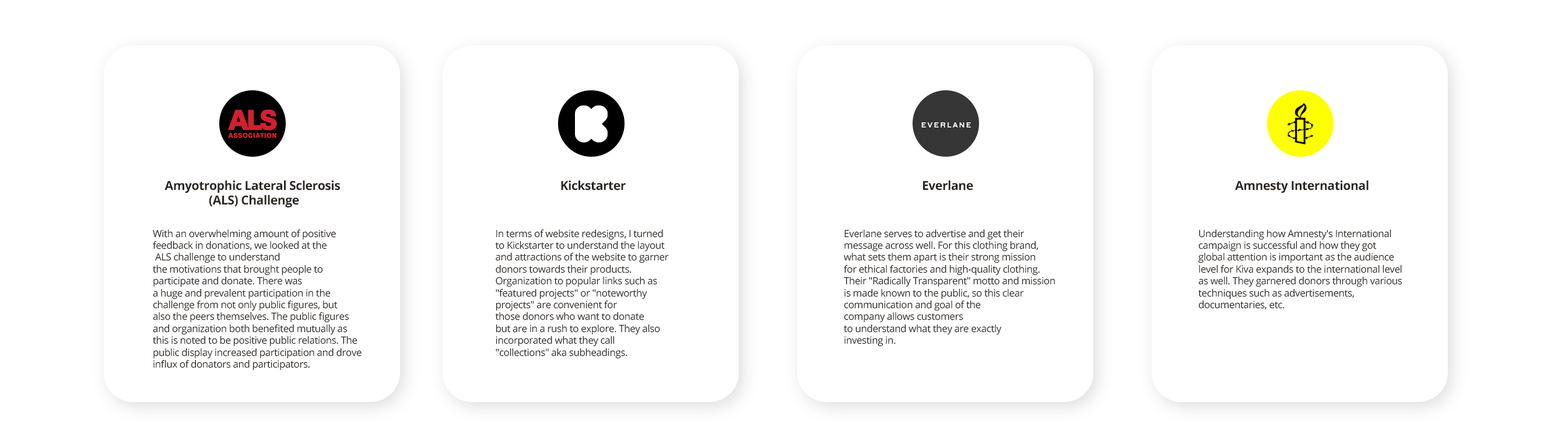
<style>
.page{position:relative;width:1568px;height:448px;background:#ffffff}
.page>*{position:absolute;margin:0}
.t1{font:12.4px "OpenSans-Bold";letter-spacing:-0.025em;color:#2b2520}
.t2{font:9.9px "OpenSans-Regular";letter-spacing:-0.025em;color:#2b2520}
</style>
<div class="page">
<p class="t1" style="left:164px;top:180px;width:176px;height:28px;text-align:center">Amyotrophic Lateral Sclerosis <br>(ALS) Challenge</p>
<p class="t1" style="left:561px;top:180px;width:65px;height:11px">Kickstarter</p>
<p class="t1" style="left:923px;top:180px;width:50px;height:11px">Everlane</p>
<p class="t1" style="left:1235px;top:180px;width:134px;height:13px">Amnesty International</p>
<p class="t2" style="left:153px;top:229px;width:209px;height:142px">With an overwhelming amount of positive <br>feedback in donations, we looked at the<br> ALS challenge to understand <br>the motivations that brought people to <br>participate and donate. There was<br>a huge and prevalent participation in the <br>challenge from not only public figures, but<br>also the peers themselves. The public figures <br>and organization both benefited mutually as <br>this is noted to be positive public relations. The<br>public display increased participation and drove<br>influx of donators and participators.</p>
<p class="t2" style="left:495px;top:229px;width:174px;height:130px">In terms of website redesigns, I turned<br>to Kickstarter to understand the layout<br>and attractions of the website to garner<br>donors towards their products. <br>Organization to popular links such as <br>"featured projects" or "noteworthy <br>projects" are convenient for <br>those donors who want to donate <br>but are in a rush to explore. They also<br>incorporated what they call <br>"collections" aka subheadings.</p>
<p class="t2" style="left:844px;top:229px;width:211px;height:118px">Everlane serves to advertise and get their<br>message across well. For this clothing brand,<br>what sets them apart is their strong mission<br>for ethical factories and high-quality clothing. <br>Their "Radically Transparent" motto and mission <br>is made known to the public, so this clear <br>communication and goal of the <br>company allows customers<br>to understand what they are exactly <br>investing in.</p>
<p class="t2" style="left:1198px;top:229px;width:204px;height:81px">Understanding how Amnesty's International <br>campaign is successful and how they got <br>global attention is important as the audience <br>level for Kiva expands to the international level<br>as well. They garnered donors through various<br>techniques such as advertisements, <br>documentaries, etc.</p>
</div>
